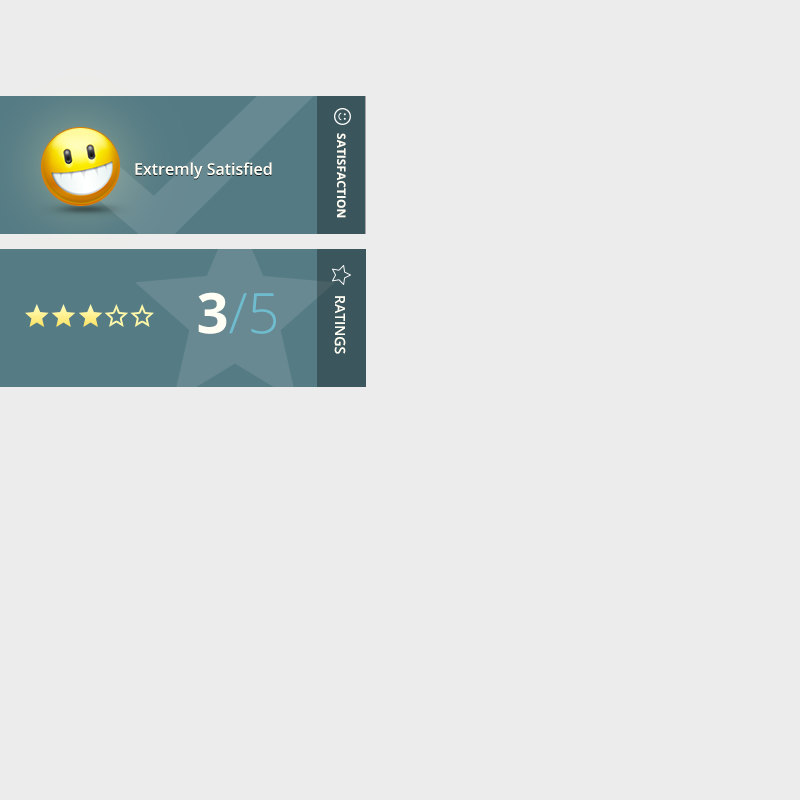
<style>
.page{position:relative;width:800px;height:800px;background:#ececec}
.page>*{position:absolute;margin:0}
.t1{font:12px "OpenSans-Bold";color:#fffff6;text-transform:uppercase}
.t2{font:16px "OpenSans-Semibold";color:#fffff6}
.t3{font:56px "OpenSans-Light";color:#6ebcce}
.t4{font:56px "OpenSans-Bold";color:#fffff6}
.t5{font:14px "OpenSans-Semibold";color:#fffff6;text-transform:uppercase}
</style>
<div class="page">
<p class="t1" style="left:337px;top:133px;width:9px;height:85px;rotate:90deg">satisfaction</p>
<p class="t2" style="left:135px;top:162px;width:137px;height:17px">Extremly Satisfied</p>
<p class="t3" style="left:198px;top:292px;width:78px;height:42px"><span class="t4">3</span>/5</p>
<p class="t5" style="left:334px;top:296px;width:12px;height:58px;rotate:90deg">Ratings</p>
</div>
